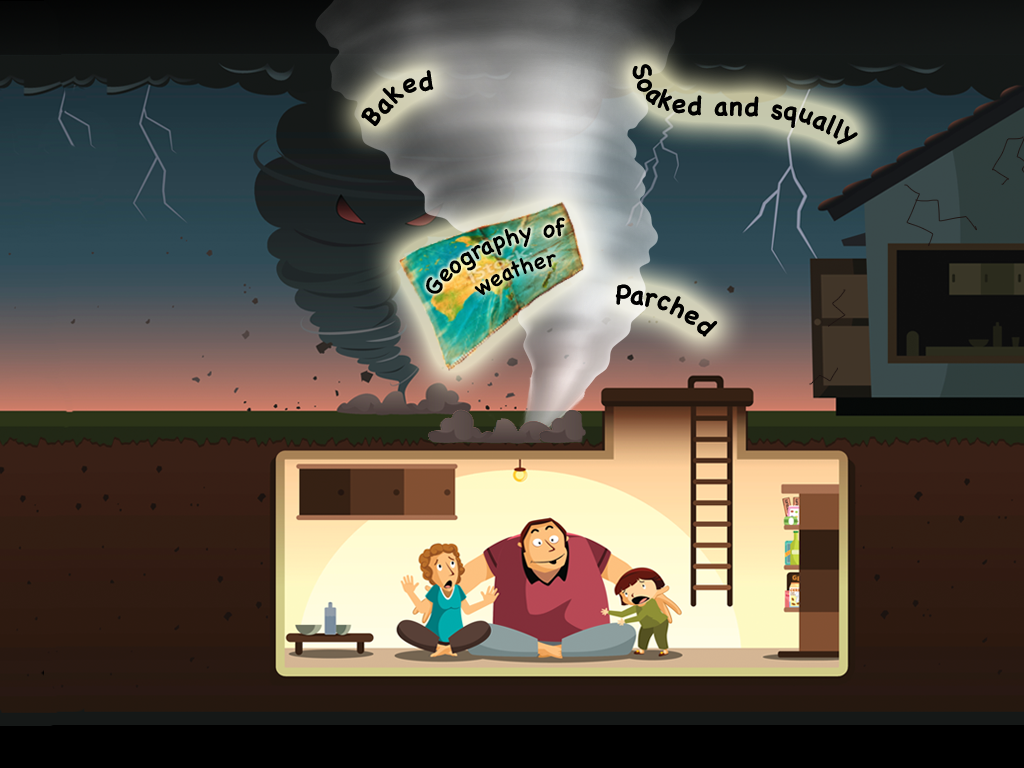
<style>
.page{position:relative;width:1024px;height:768px}
.page>*{position:absolute;margin:0}
.t1{font:26.4px "Chalkboard-Bold";color:#000000}
.t2{font:26.4px "Chalkboard-Bold";letter-spacing:0.05em;color:#000000}
.t3{font:26.3px "Chalkboard-Bold";color:#000000}
.t4{font:23.6px "Chalkboard-Bold";color:#000000}
.t5{font:22.2px "Chalkboard-Bold";color:#000000}
</style>
<div class="page">
<p class="t1" style="left:632px;top:64px;width:226px;height:81px;rotate:173deg"><span class="t2">Soak</span>ed and squally</p>
<p class="t1" style="left:632px;top:64px;width:226px;height:81px;rotate:173deg"><span class="t2">Soak</span>ed and squally</p>
<p class="t3" style="left:361px;top:70px;width:73px;height:57px;rotate:137deg">Baked</p>
<p class="t3" style="left:361px;top:70px;width:73px;height:57px;rotate:137deg">Baked</p>
<p class="t4" style="left:426px;top:217px;width:139px;height:77px;rotate:-66deg">Geography of</p>
<p class="t5" style="left:474px;top:254px;width:82px;height:41px;rotate:-65deg">weather</p>
<p class="t1" style="left:615px;top:284px;width:103px;height:53px;rotate:-117deg">Parched</p>
<p class="t1" style="left:615px;top:284px;width:103px;height:53px;rotate:-117deg">Parched</p>
</div>
